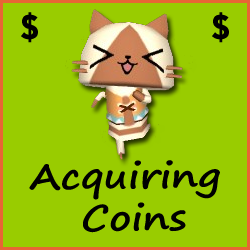
<style>
.page{position:relative;width:250px;height:250px;background:#99cc00}
.page>*{position:absolute;margin:0}
.t1{font:36px "TwCenMT-CondensedExtraBold";color:#000000}
.t2{font:35px "SegoePrint-Bold";color:#000000;scale:1.14 1}
</style>
<div class="page">
<p class="t1" style="left:21px;top:12px;width:17px;height:31px">$</p>
<p class="t1" style="left:212px;top:12px;width:17px;height:31px">$</p>
<p class="t2" style="left:29px;top:160px;width:191px;height:73px;text-align:center;rotate:-1deg">Acquiring <br>Coins</p>
</div>
